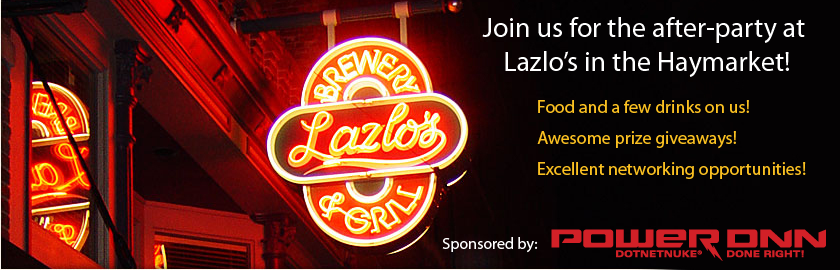
<style>
.page{position:relative;width:840px;height:270px;background:#040203}
.page>*{position:absolute;margin:0}
.t1{font:28px "MyriadPro-Regular";color:#ffffff}
.t2{font:18px "MyriadPro-Regular";color:#fac021}
.t3{font:16px "MyriadPro-Regular";color:#ffffff}
</style>
<div class="page">
<p class="t1" style="left:482px;top:17px;width:323px;height:60px;text-align:center">Join us for the after-party at<br> Lazlo’s in the Haymarket!</p>
<p class="t2" style="left:537px;top:100px;width:269px;height:79px">Food and a few drinks on us!<br><br>Awesome prize giveaways!<br><br>Excellent networking opportunities!</p>
<p class="t3" style="left:442px;top:237px;width:96px;height:16px">Sponsored by:</p>
</div>
